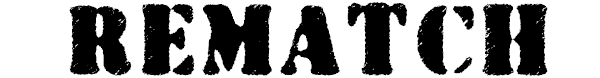
<style>
.page{position:relative;width:600px;height:78px;background:#ffffff}
.page>*{position:absolute;margin:0}
.t1{font:70.8px "Wartorn";color:#000000}
</style>
<div class="page">
<p class="t1" style="left:69px;top:2px;width:479px;height:74px">rematch</p>
</div>
